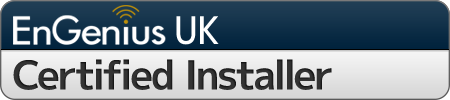
<style>
.page{position:relative;width:450px;height:100px}
.page>*{position:absolute;margin:0}
.t1{font:38px "mplus-2p-medium";color:#ffffff;scale:0.9 1}
.t2{font:40px "mplus-2p-bold";letter-spacing:-0.04em;color:#333333}
</style>
<div class="page">
<p class="t1" style="left:176px;top:16px;width:43px;height:29px">UK</p>
<p class="t2" style="left:13px;top:59px;width:319px;height:31px">Certified Installer</p>
</div>
